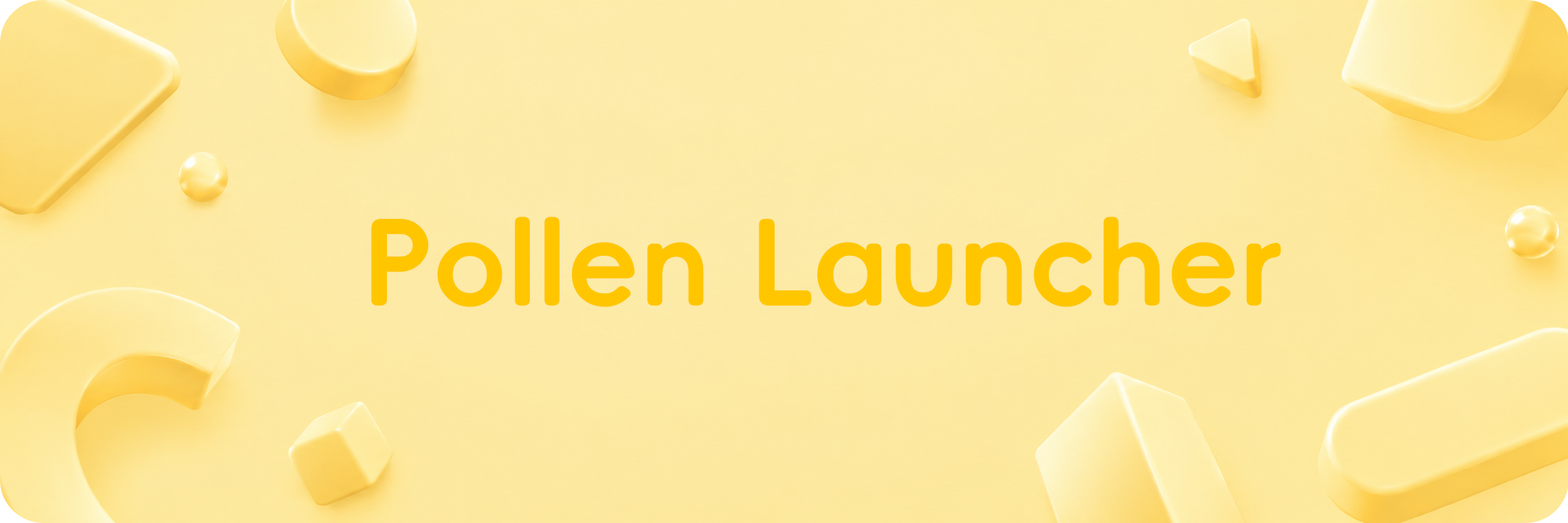
<style>
.page{position:relative;width:1568px;height:523px}
.page>*{position:absolute;margin:0}
.t1{font:117px "AlimamaFangYuanTi-Bold";color:#ffc600}
</style>
<div class="page">
<p class="t1" style="left:371px;top:217px;width:910px;height:90px">Pollen Launcher</p>
</div>
